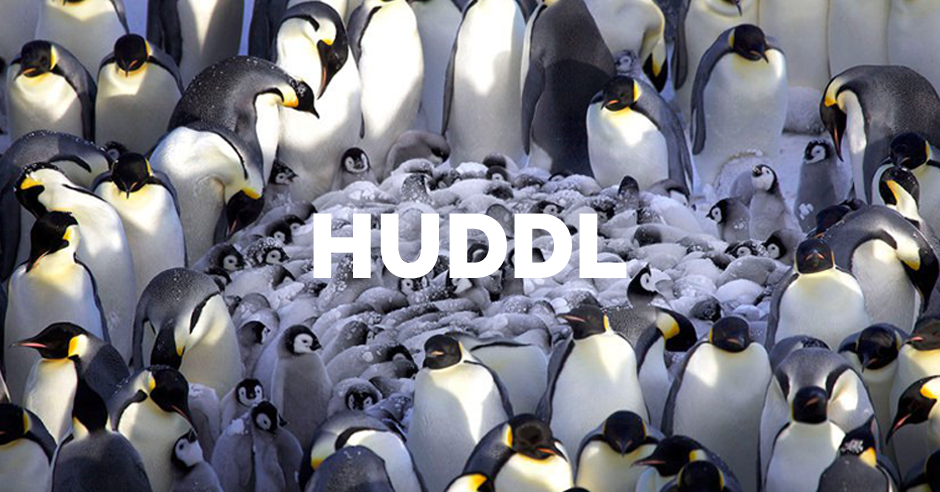
<style>
.page{position:relative;width:940px;height:492px}
.page>*{position:absolute;margin:0}
.t1{font:91px "Raleway-Black";color:#ffffff;text-transform:uppercase}
</style>
<div class="page">
<p class="t1" style="left:313px;top:213px;width:314px;height:66px">HUDDL</p>
</div>
